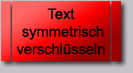
<style>
.page{position:relative;width:133px;height:73px}
.page>*{position:absolute;margin:0}
.t1{font:14.7px "ArialMT";color:#000000}
</style>
<div class="page">
<p class="t1" style="left:16px;top:8px;width:89px;height:47px;text-align:center">Text<br> symmetrisch<br>verschlüsseln</p>
</div>
